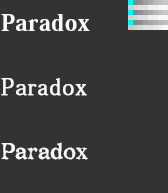
<style>
.page{position:relative;width:168px;height:193px;background:#333333}
.page>*{position:absolute;margin:0}
.t1{font:22px/64px "KozMinPro-Heavy";letter-spacing:0.022em;color:#f8f8f8}
.t2{font:22px/64px "AdobeFangsongStd-Regular";letter-spacing:0.028em;color:#f8f8f8;font-weight:bold}
.t3{font:22px/64px "ComicMysteryStd-DB";letter-spacing:-0.006em;color:#f8f8f8}
</style>
<div class="page">
<p class="t1" style="left:1px;top:14px;width:89px;height:146px">Paradox<br><span class="t2">Paradox<br></span><span class="t3">Paradox</span></p>
</div>
